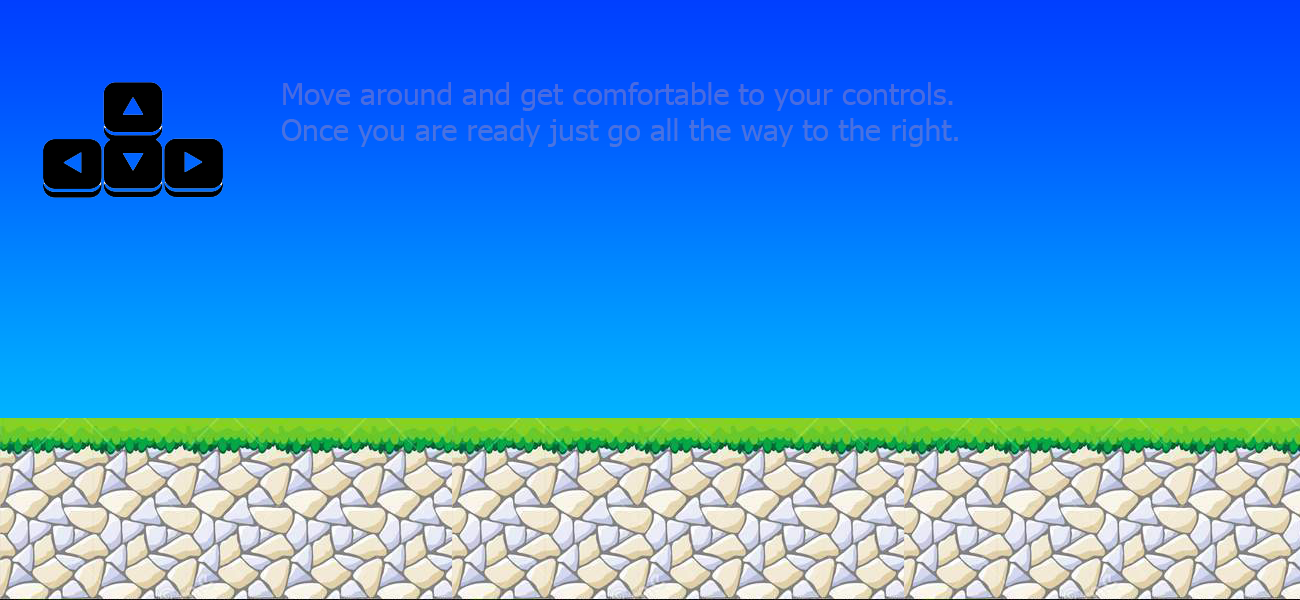
<style>
.page{position:relative;width:1300px;height:600px}
.page>*{position:absolute;margin:0}
.t1{font:30px "Tahoma";color:#496de1}
</style>
<div class="page">
<p class="t1" style="left:282px;top:82px;width:676px;height:65px">Move around and get comfortable to your controls.<br>Once you are ready just go all the way to the right.</p>
</div>
